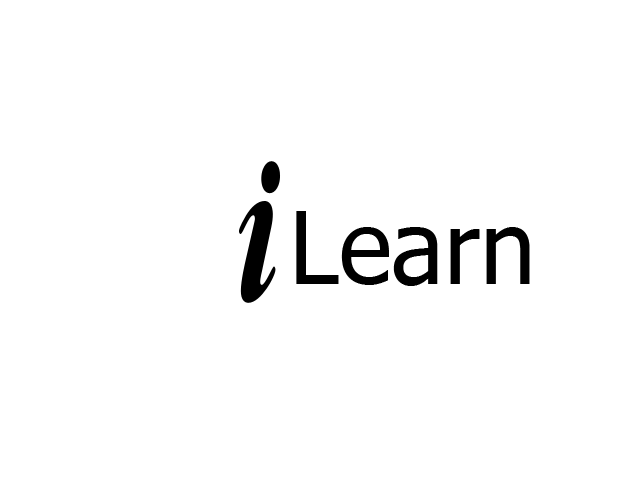
<style>
.page{position:relative;width:640px;height:480px;background:#ffffff}
.page>*{position:absolute;margin:0}
.t1{font:100px "Tahoma";color:#000000}
</style>
<div class="page">
<p class="t1" style="left:296px;top:211px;width:234px;height:75px">Learn</p>
</div>
